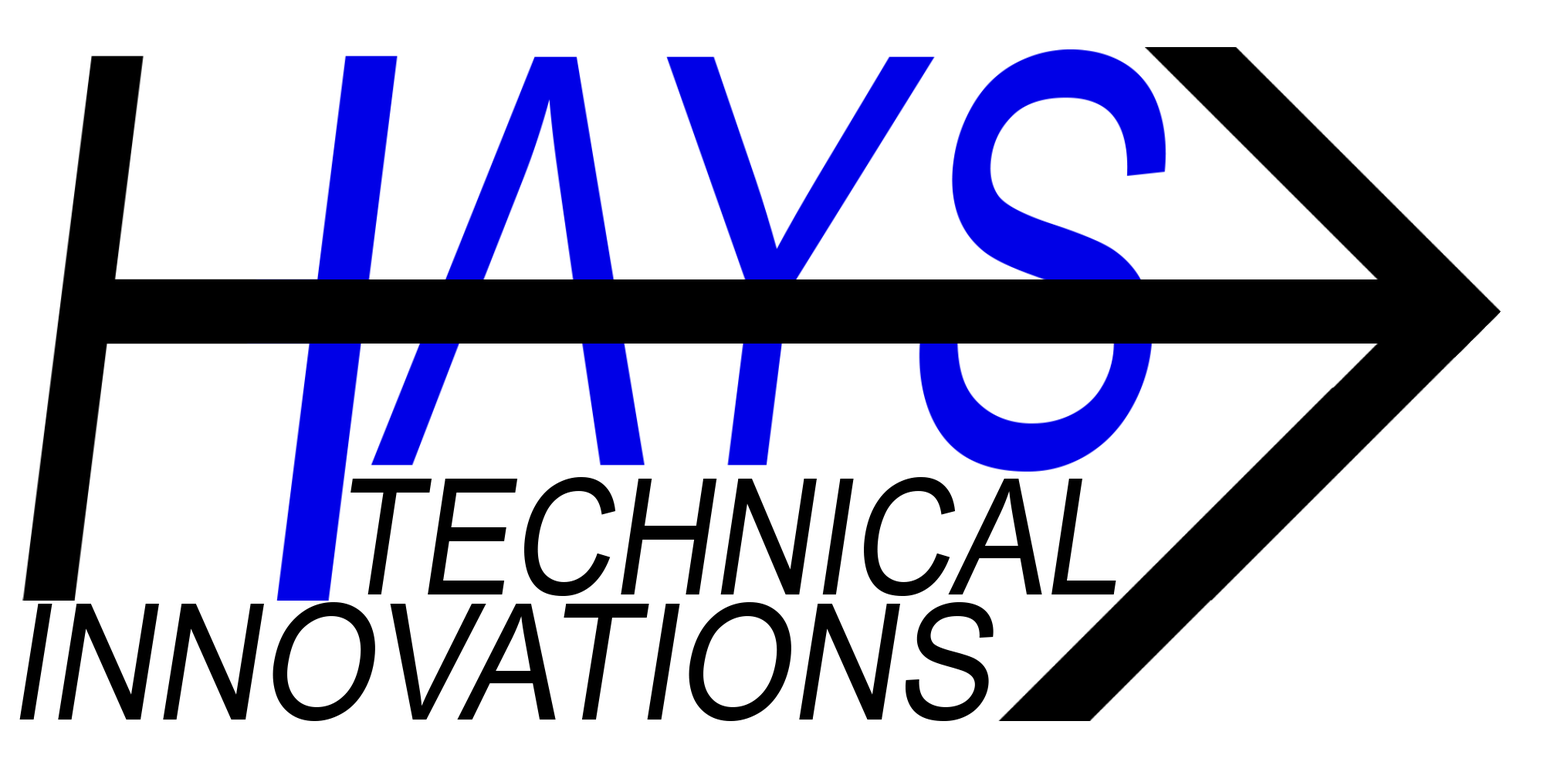
<style>
.page{position:relative;width:1544px;height:772px;background:#ffffff}
.page>*{position:absolute;margin:0}
.t1{font:161.6px "ArialMT";letter-spacing:0.001em;color:#000000;text-transform:uppercase;font-style:italic;scale:0.86 1}
.t2{font:161.6px "ArialMT";color:#000000;text-transform:uppercase;font-style:italic;scale:0.9 1}
</style>
<div class="page">
<p class="t1" style="left:351px;top:477px;width:766px;height:119px">Technical</p>
<p class="t2" style="left:19px;top:602px;width:975px;height:119px">Innovations</p>
</div>
